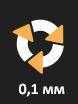
<style>
.page{position:relative;width:78px;height:104px;background:#202020}
.page>*{position:absolute;margin:0}
.t1{font:12px "Calibri-Bold";color:#ffffff}
</style>
<div class="page">
<p class="t1" style="left:19px;top:83px;width:46px;height:14px">0,1 мм</p>
</div>
